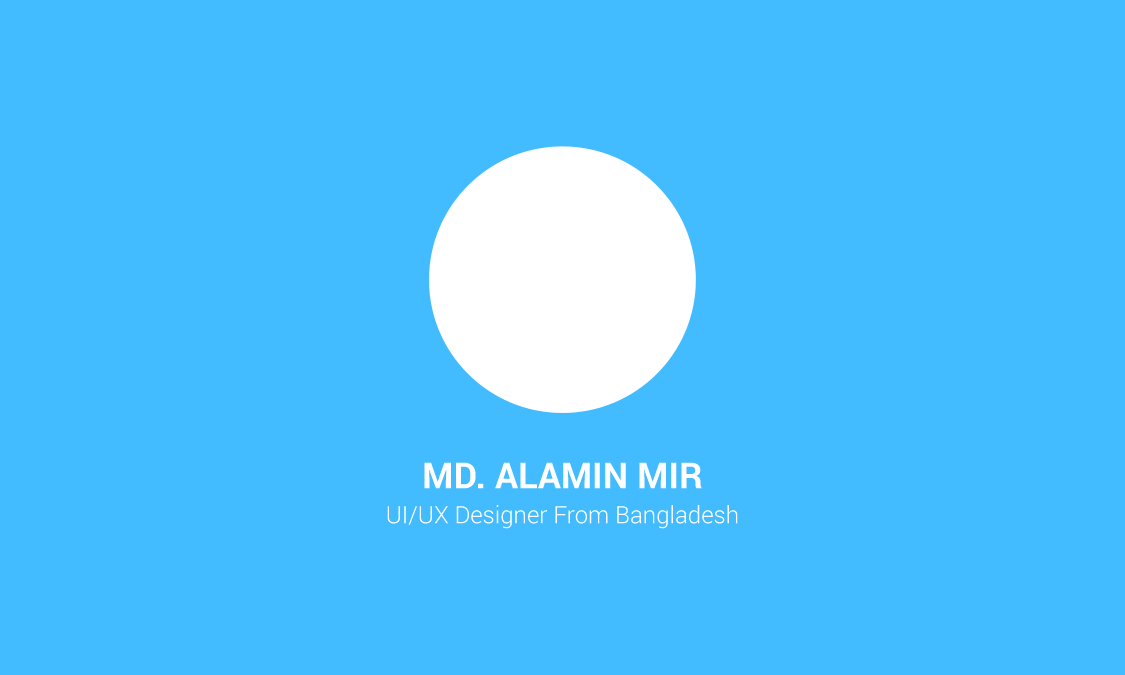
<style>
.page{position:relative;width:1125px;height:675px;background:#43bbff}
.page>*{position:absolute;margin:0}
.t1{font:24px/34.9px "Roboto-Light";color:#ffffff}
.t2{font:36px "Roboto-Bold";color:#ffffff;text-transform:uppercase}
</style>
<div class="page">
<p class="t1" style="left:387px;top:462px;width:351px;height:67px;text-align:center"><span class="t2">MD. Alamin Mir<br></span>UI/UX Designer From Bangladesh</p>
</div>
